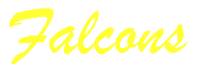
<style>
.page{position:relative;width:200px;height:72px;background:#ffffff}
.page>*{position:absolute;margin:0}
.t1{font:72px "BrushScriptMT";color:#ffff33}
</style>
<div class="page">
<p class="t1" style="left:9px;top:8px;width:178px;height:56px">Falcons</p>
</div>
